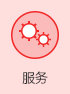
<style>
.page{position:relative;width:70px;height:94px;background:#ffdede}
.page>*{position:absolute;margin:0}
.t1{font:13px "MicrosoftYaHei";color:#323232}
</style>
<div class="page">
<p class="t1" style="left:22px;top:71px;width:26px;height:13px">服务</p>
</div>
